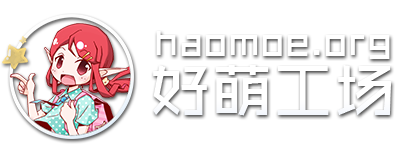
<style>
.page{position:relative;width:400px;height:150px;background:#ffffff}
.page>*{position:absolute;margin:0}
.t1{font:39.4px "ZHSCNMT--GBK1-0";color:#ffffff}
.t2{font:61.8px "ZHSCNMT--GBK1-0";color:#ffffff}
</style>
<div class="page">
<p class="t1" style="left:156px;top:31px;width:234px;height:28px">haomoe.org</p>
<p class="t2" style="left:153px;top:65px;width:239px;height:51px">好萌工场</p>
</div>
